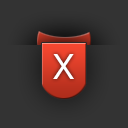
<style>
.page{position:relative;width:128px;height:128px;background:#333333}
.page>*{position:absolute;margin:0}
.t1{font:36px "MC360";color:#ffffff}
</style>
<div class="page">
<p class="t1" style="left:53px;top:54px;width:21px;height:25px">X</p>
</div>
